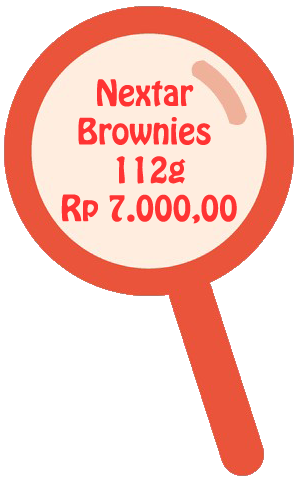
<style>
.page{position:relative;width:297px;height:479px;background:#ffffff}
.page>*{position:absolute;margin:0}
.t1{font:32px "HoboStd";color:#ff3333}
</style>
<div class="page">
<p class="t1" style="left:61px;top:79px;width:176px;height:145px;text-align:center">Nextar <br>Brownies <br>112g<br>Rp 7.000,00</p>
</div>
